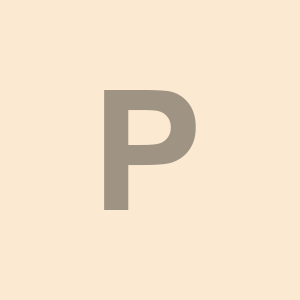
<style>
.page{position:relative;width:300px;height:300px;background:#fbe9d1}
.page>*{position:absolute;margin:0}
.t1{font:166.7px "Arial-BoldMT";color:#9f9384}
</style>
<div class="page">
<p class="t1" style="left:104px;top:90px;width:92px;height:120px">P</p>
</div>
